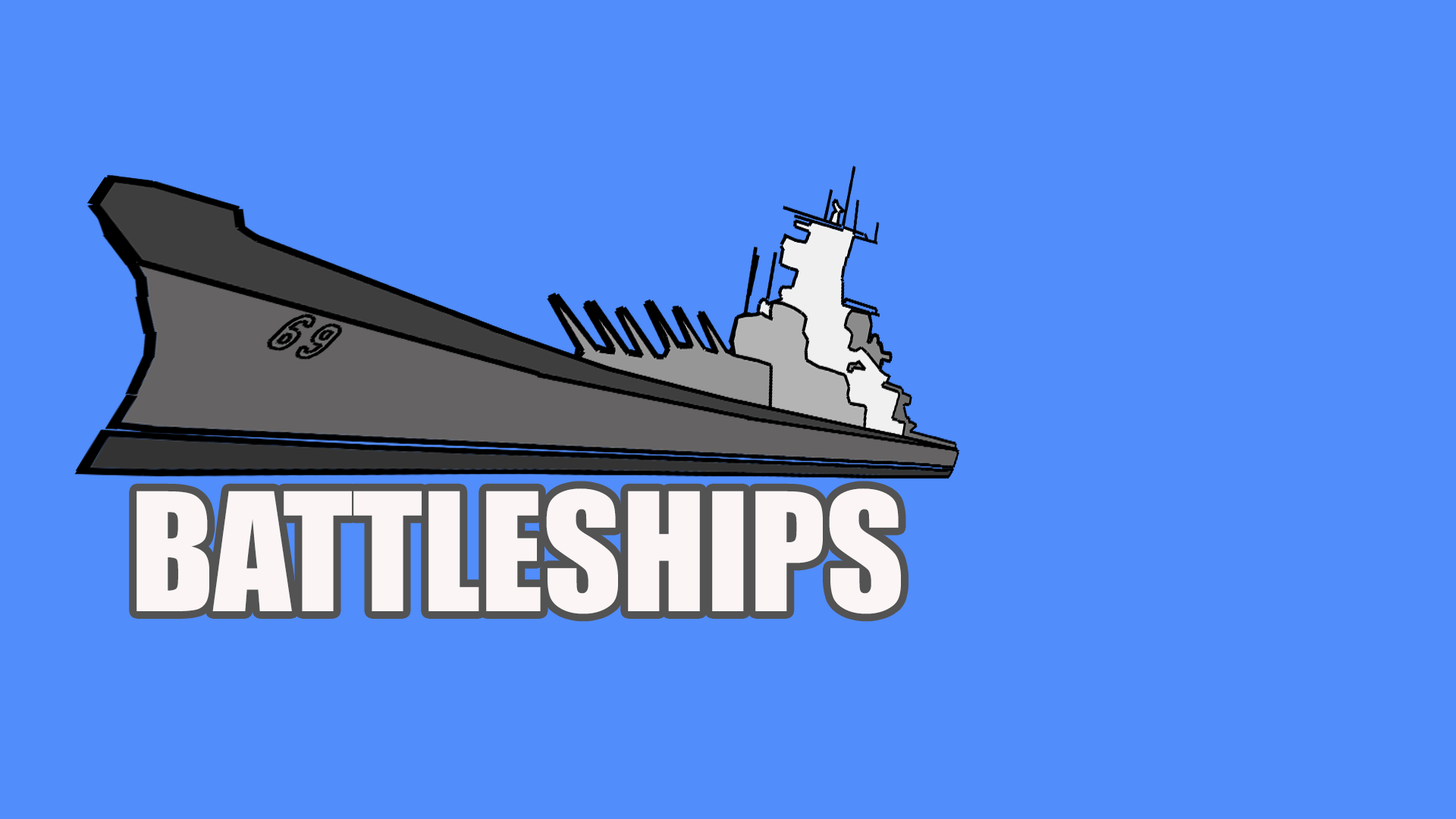
<style>
.page{position:relative;width:1456px;height:819px;background:#518dfb}
.page>*{position:absolute;margin:0}
.t1{font:151.7px "Impact";color:#fbf5f5}
</style>
<div class="page">
<p class="t1" style="left:136px;top:488px;width:765px;height:126px">BATTLESHIPS</p>
</div>
